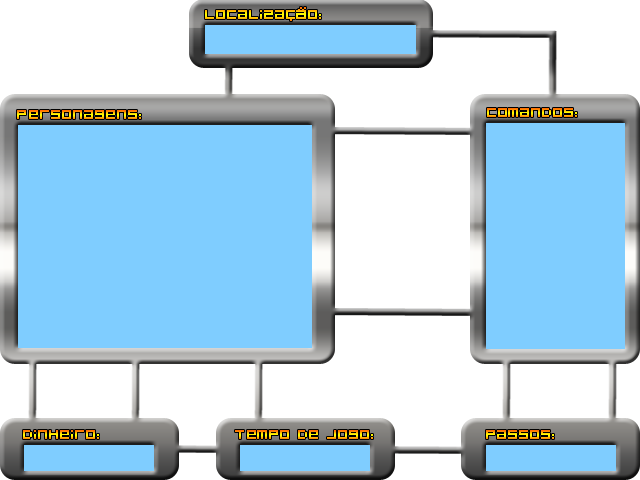
<style>
.page{position:relative;width:640px;height:480px;background:#ffffff}
.page>*{position:absolute;margin:0}
.t1{font:14px "BitDustTwo"}
</style>
<div class="page">
<p class="t1" style="left:205px;top:7px;width:116px;height:14px">LOcalização:</p>
<p class="t1" style="left:17px;top:110px;width:124px;height:9px">Personagens:</p>
<p class="t1" style="left:487px;top:108px;width:90px;height:9px">comandos:</p>
<p class="t1" style="left:23px;top:430px;width:76px;height:9px">Dinheiro:</p>
<p class="t1" style="left:235px;top:430px;width:138px;height:9px">Tempo de jogo:</p>
<p class="t1" style="left:486px;top:430px;width:68px;height:9px">Passos:</p>
</div>
